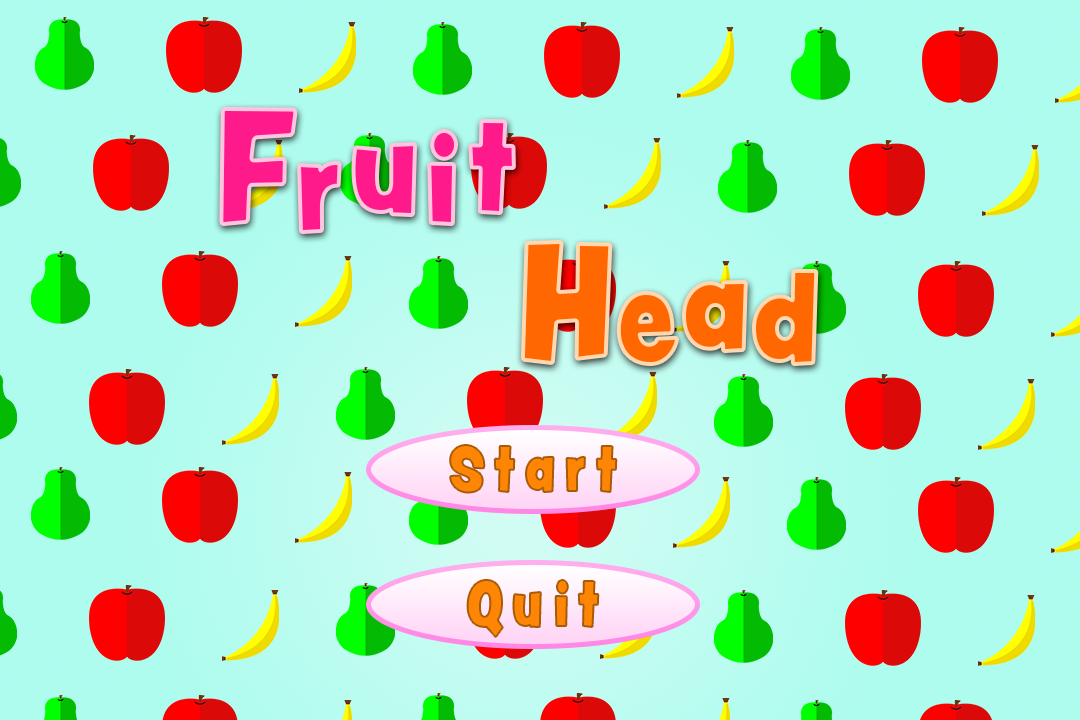
<style>
.page{position:relative;width:1080px;height:720px;background:#aefcee}
.page>*{position:absolute;margin:0}
.t1{font:144px "PeachyKeenJF";letter-spacing:0.1em;color:#ff1a8b;scale:0.9 1}
.t2{font:115.2px "PeachyKeenJF";letter-spacing:0.1em;color:#ff1a8b;scale:0.9 1}
.t3{font:144px "PeachyKeenJF";letter-spacing:0.1em;color:#ff6701;scale:0.9 1}
.t4{font:115.2px "PeachyKeenJF";letter-spacing:0.1em;color:#ff6701;scale:0.9 1}
.t5{font:56.4px "PeachyKeenJF";letter-spacing:0.2em;color:#ff8604;scale:0.84 1}
</style>
<div class="page">
<p class="t1" style="left:221px;top:109px;width:75px;height:115px">F</p>
<p class="t2" style="left:470px;top:121px;width:44px;height:92px">t</p>
<p class="t2" style="left:429px;top:131px;width:27px;height:93px">i</p>
<p class="t2" style="left:353px;top:144px;width:63px;height:71px">u</p>
<p class="t2" style="left:299px;top:163px;width:41px;height:69px">r</p>
<p class="t3" style="left:522px;top:242px;width:89px;height:121px">H</p>
<p class="t4" style="left:754px;top:271px;width:63px;height:93px">d</p>
<p class="t4" style="left:618px;top:293px;width:59px;height:71px">e</p>
<p class="t4" style="left:684px;top:282px;width:62px;height:69px">a</p>
<p class="t5" style="left:450px;top:445px;width:167px;height:48px">Start</p>
<p class="t5" style="left:467px;top:580px;width:132px;height:57px">Quit</p>
</div>
